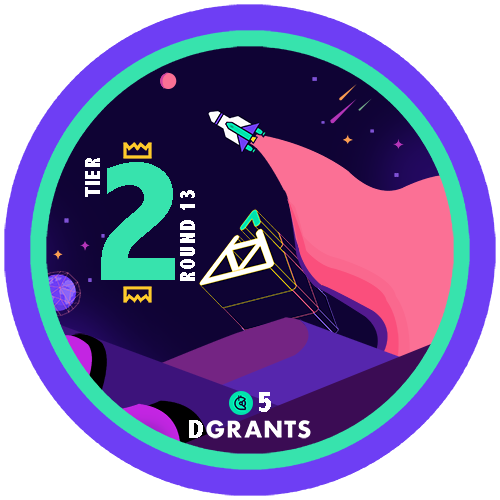
<style>
.page{position:relative;width:500px;height:500px;background:#ffffff}
.page>*{position:absolute;margin:0}
.t1{font:21.8px "AbadiMT-CondensedExtraBold";letter-spacing:0.05em;color:#ffffff}
.t2{font:178.3px "AbadiMT-CondensedExtraBold";letter-spacing:0.05em;color:#37e3ad}
.t3{font:30.9px "AbadiMT-CondensedExtraBold";letter-spacing:0.05em;color:#ffffff}
.t4{font:26.2px "AbadiMT-CondensedExtraBold";letter-spacing:0.05em;color:#fcfcfc;scale:1.2 1}
</style>
<div class="page">
<p class="t1" style="left:85px;top:158px;width:15px;height:39px;rotate:-90deg">TIER</p>
<p class="t2" style="left:101px;top:162px;width:74px;height:118px">2</p>
<p class="t1" style="left:180px;top:190px;width:15px;height:91px;rotate:-90deg">ROUND 13</p>
<p class="t3" style="left:259px;top:392px;width:12px;height:20px">5</p>
<p class="t4" style="left:189px;top:420px;width:14px;height:18px">D</p>
</div>
